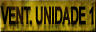
<style>
.page{position:relative;width:96px;height:32px}
.page>*{position:absolute;margin:0}
.t1{font:24px "Arial-BoldMT";letter-spacing:-0.04em;color:#000000;text-transform:uppercase;font-weight:bold;scale:0.47 1}
</style>
<div class="page">
<p class="t1" style="left:0px;top:6px;width:94px;height:19px">VENT. unidade 1</p>
</div>
